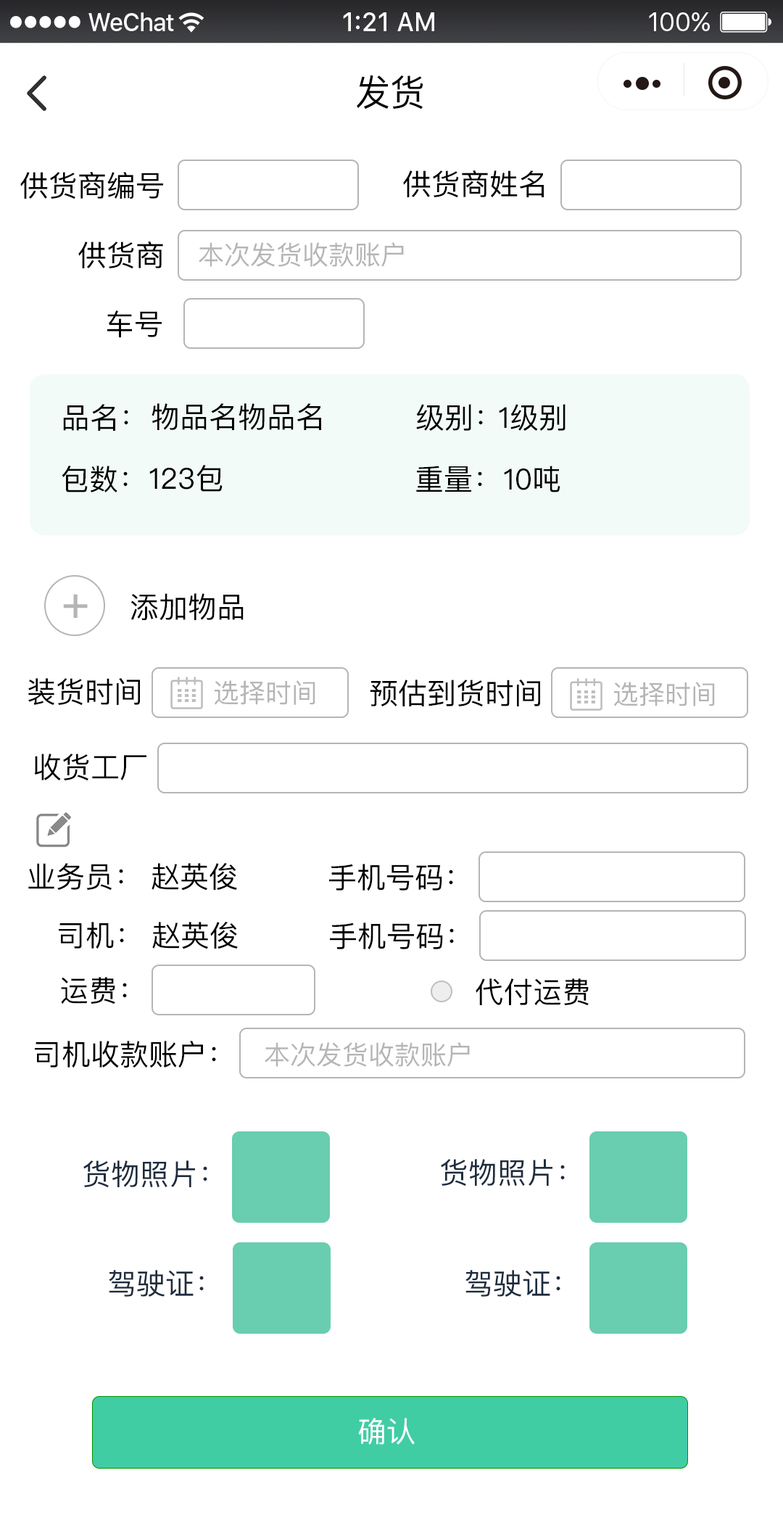
<style>
.page{position:relative;width:783px;height:1523px;background:#ffffff}
.page>*{position:absolute;margin:0}
.t1{font:36.3px "PingFangSC-Regular";color:#000000}
.t2{font:29px "PingFangSC-Regular";color:#000000}
.t3{font:26.1px "PingFangSC-Regular";color:#b5b5b5}
.t4{font:45.7px "PingFangSC-Regular";letter-spacing:0.1em;color:#b5b5b5;font-weight:bold}
.t5{font:29px "PingFangSC-Regular";color:#1e2c3e}
.t6{font:29px "PingFangSC-Regular";color:#ffffff}
</style>
<div class="page">
<p class="t1" style="left:357px;top:75px;width:66px;height:34px">发货</p>
<p class="t2" style="left:20px;top:172px;width:143px;height:27px">供货商编号</p>
<p class="t2" style="left:403px;top:170px;width:141px;height:28px">供货商姓名</p>
<p class="t2" style="left:78px;top:241px;width:85px;height:28px">供货商</p>
<p class="t3" style="left:199px;top:242px;width:205px;height:25px">本次发货收款账户</p>
<p class="t2" style="left:107px;top:310px;width:55px;height:28px">车号</p>
<p class="t2" style="left:63px;top:404px;width:65px;height:27px">品名：</p>
<p class="t2" style="left:152px;top:403px;width:169px;height:27px">物品名物品名</p>
<p class="t2" style="left:416px;top:404px;width:67px;height:27px">级别：</p>
<p class="t2" style="left:499px;top:404px;width:67px;height:27px">1级别</p>
<p class="t2" style="left:62px;top:466px;width:66px;height:26px">包数：</p>
<p class="t2" style="left:149px;top:465px;width:74px;height:27px">123包</p>
<p class="t2" style="left:416px;top:466px;width:66px;height:26px">重量：</p>
<p class="t2" style="left:504px;top:466px;width:56px;height:26px">10吨</p>
<p class="t4" style="left:63px;top:594px;width:25px;height:24px">+</p>
<p class="t2" style="left:131px;top:593px;width:113px;height:28px">添加物品</p>
<p class="t2" style="left:28px;top:678px;width:112px;height:28px">装货时间</p>
<p class="t3" style="left:215px;top:680px;width:100px;height:25px">选择时间</p>
<p class="t2" style="left:370px;top:679px;width:170px;height:28px">预估到货时间</p>
<p class="t3" style="left:614px;top:682px;width:101px;height:24px">选择时间</p>
<p class="t2" style="left:34px;top:753px;width:112px;height:28px">收货工厂</p>
<p class="t2" style="left:28px;top:863px;width:95px;height:27px">业务员：</p>
<p class="t2" style="left:152px;top:863px;width:85px;height:27px">赵英俊</p>
<p class="t2" style="left:329px;top:864px;width:124px;height:27px">手机号码：</p>
<p class="t2" style="left:59px;top:922px;width:65px;height:27px">司机：</p>
<p class="t2" style="left:152px;top:922px;width:86px;height:27px">赵英俊</p>
<p class="t2" style="left:330px;top:922px;width:124px;height:28px">手机号码：</p>
<p class="t2" style="left:61px;top:977px;width:66px;height:27px">运费：</p>
<p class="t2" style="left:476px;top:978px;width:113px;height:28px">代付运费</p>
<p class="t2" style="left:35px;top:1041px;width:181px;height:27px">司机收款账户：</p>
<p class="t3" style="left:265px;top:1042px;width:205px;height:25px">本次发货收款账户</p>
<p class="t5" style="left:83px;top:1160px;width:124px;height:28px">货物照片：</p>
<p class="t5" style="left:441px;top:1159px;width:124px;height:27px">货物照片：</p>
<p class="t5" style="left:109px;top:1270px;width:95px;height:26px">驾驶证：</p>
<p class="t5" style="left:466px;top:1270px;width:94px;height:26px">驾驶证：</p>
<p class="t6" style="left:358px;top:1418px;width:57px;height:26px">确认</p>
</div>
